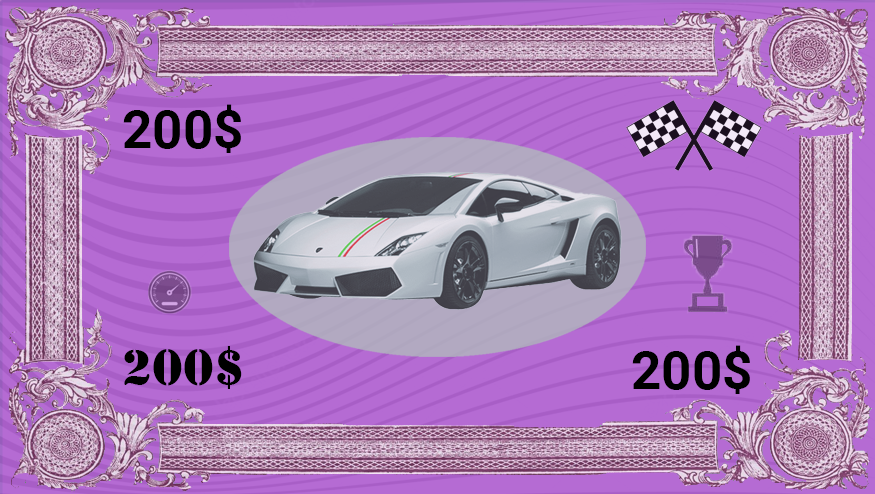
<style>
.page{position:relative;width:875px;height:494px;background:#b56bd3}
.page>*{position:absolute;margin:0}
.t1{font:53.3px "Roboto-Bold";color:#000000}
.t2{font:53.3px "Stencil";color:#000000}
</style>
<div class="page">
<p class="t1" style="left:123px;top:104px;width:118px;height:49px">200$</p>
<p class="t2" style="left:124px;top:346px;width:118px;height:43px">200$</p>
<p class="t1" style="left:632px;top:345px;width:118px;height:49px">200$</p>
</div>
